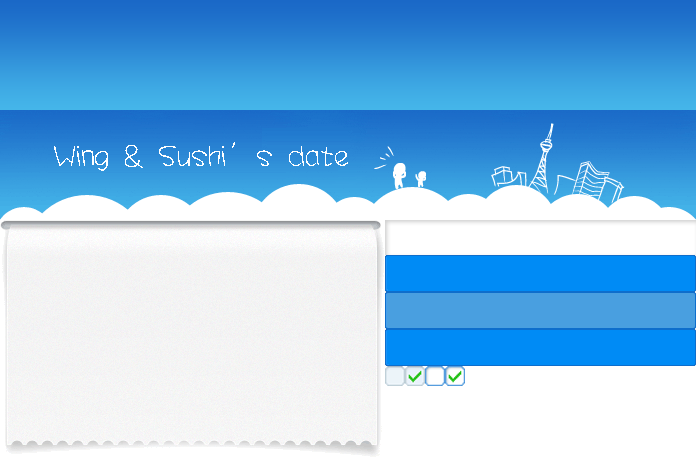
<style>
.page{position:relative;width:696px;height:460px}
.page>*{position:absolute;margin:0}
.t1{font:30px "JYaYa";color:#ffffff}
</style>
<div class="page">
<p class="t1" style="left:54px;top:142px;width:294px;height:29px">Wing &amp; Sushi’s date</p>
</div>
